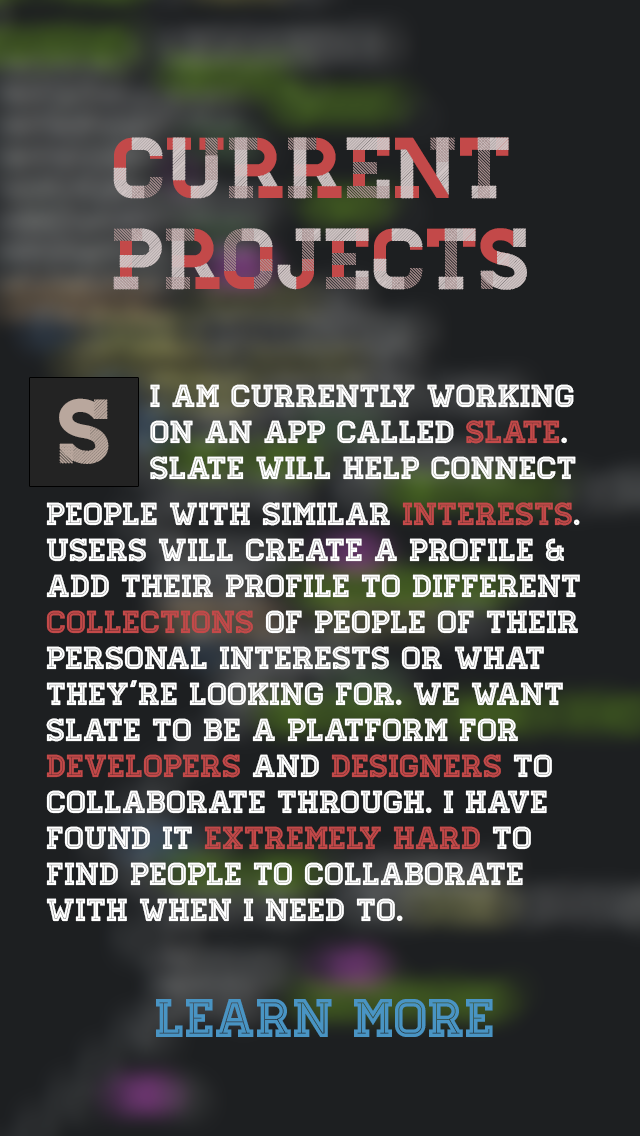
<style>
.page{position:relative;width:640px;height:1136px;background:#1d1f21}
.page>*{position:absolute;margin:0}
.t1{font:86px/90.6px "Homestead-Two";color:#cfc4c4}
.t2{font:86px/90.6px "Homestead-One";color:#c34949}
.t3{font:86px/90.6px "Homestead-Three";color:#ad9393}
.t4{font:31.7px/36px "Homestead-Inline";color:#ffffff}
.t5{font:31.7px/36px "Homestead-Inline";color:#c34949}
.t6{font:90.6px "Homestead-Display";color:#b9a79d}
.t7{font:54.3px "Homestead-Inline";color:#4994c3}
</style>
<div class="page">
<p class="t1" style="left:113px;top:137px;width:414px;height:153px">Current<br>projects</p>
<p class="t2" style="left:114px;top:137px;width:400px;height:152px">Current<br>projects</p>
<p class="t3" style="left:114px;top:137px;width:379px;height:152px">Current<br>projects</p>
<p class="t4" style="left:150px;top:384px;width:426px;height:96px">I am Currently Working<br>on An App called <span class="t5">slate</span>.<br>Slate will Help connect</p>
<p class="t6" style="left:59px;top:398px;width:50px;height:66px">S</p>
<p class="t4" style="left:46px;top:502px;width:534px;height:420px">people with similar <span class="t5">interests</span>.<br>users will create a profile &amp;<br>add their profile to different<br><span class="t5">collections</span> of people of their<br>personal interests or what<br>they’re looking for. We want<br>slate to be a platform for<br><span class="t5">developers </span>and <span class="t5">designers</span> to<br>collaborate through. I have<br>found it <span class="t5">extremely hard</span> to<br>find people to collaborate<br>with when I need to.</p>
<p class="t7" style="left:156px;top:999px;width:337px;height:38px">Learn More</p>
</div>
